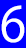
<style>
.page{position:relative;width:26px;height:48px;background:#0000ff}
.page>*{position:absolute;margin:0}
.t1{font:47.6px "KozGoPr6N-Regular";color:#ffffff}
</style>
<div class="page">
<p class="t1" style="left:1px;top:5px;width:24px;height:38px">6</p>
</div>
